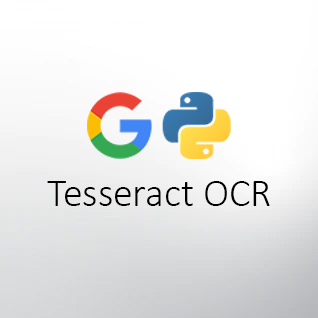
<style>
.page{position:relative;width:318px;height:318px;background:#ffffff}
.page>*{position:absolute;margin:0}
.t1{font:39.6px "Calibri-Light";color:#000000}
</style>
<div class="page">
<p class="t1" style="left:47px;top:181px;width:223px;height:25px">Tesseract OCR</p>
</div>
